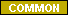
<style>
.page{position:relative;width:68px;height:15px;background:#c0ad01}
.page>*{position:absolute;margin:0}
.t1{font:11.4px "Arial-BoldMT";color:#ffffff}
</style>
<div class="page">
<p class="t1" style="left:9px;top:4px;width:50px;height:8px">COMMON</p>
</div>
